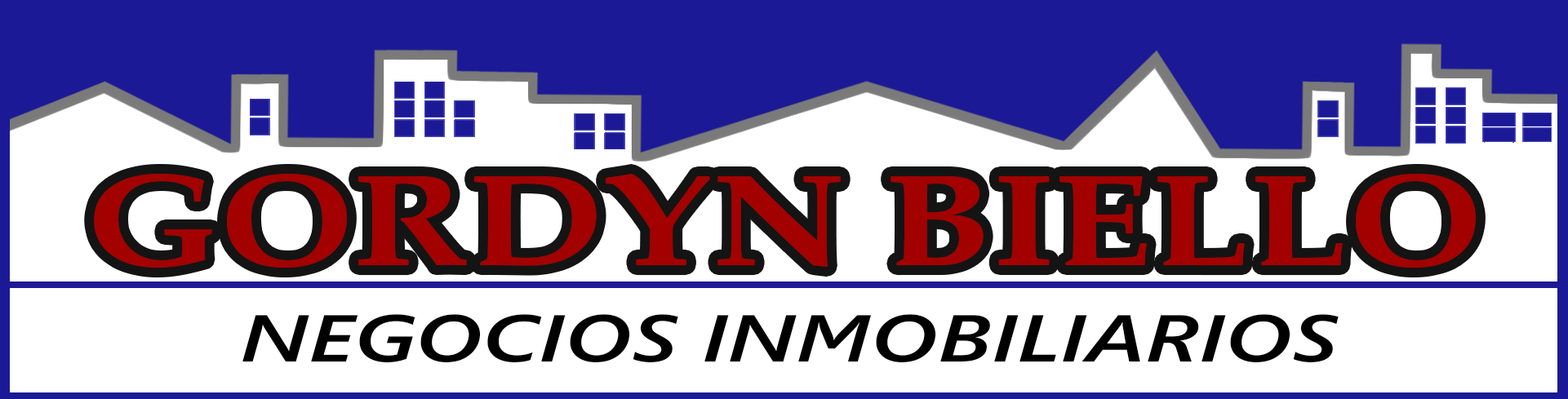
<style>
.page{position:relative;width:1568px;height:399px;background:#ffffff}
.page>*{position:absolute;margin:0}
.t1{font:129.6px "PalatinoLinotype-Bold";color:#a30000;scale:1.25 1}
.t2{font:66px "SegoeUI-SemiboldItalic";color:#010000;scale:1.34 1}
</style>
<div class="page">
<p class="t1" style="left:94px;top:174px;width:1382px;height:94px">GORDYN BIELLO</p>
<p class="t2" style="left:242px;top:314px;width:1097px;height:49px">NEGOCIOS INMOBILIARIOS</p>
</div>
